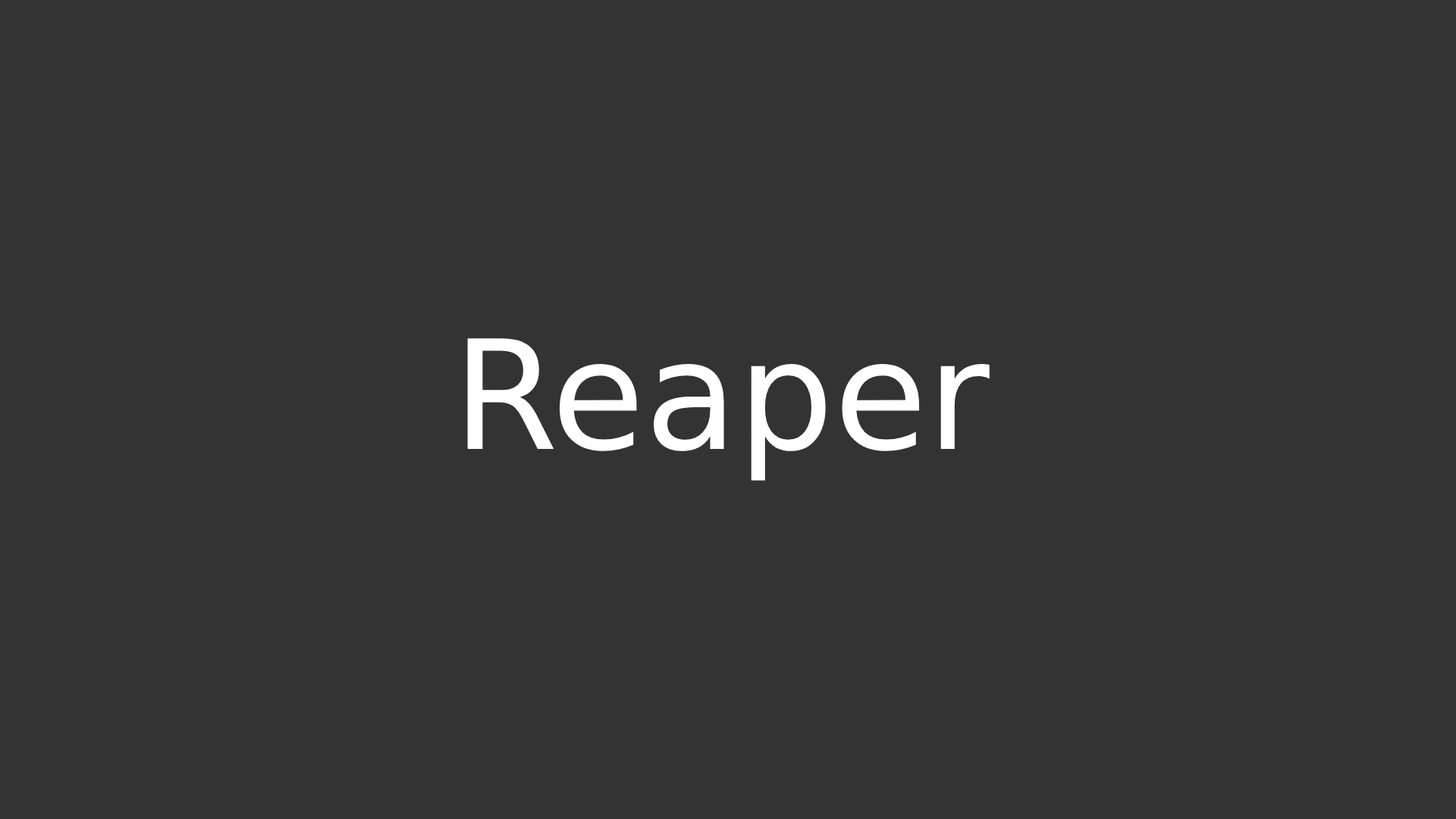
<style>
.page{position:relative;width:1456px;height:819px;background:#333333}
.page>*{position:absolute;margin:0}
.t1{font:151.7px "DejaVuSans";color:#ffffff}
</style>
<div class="page">
<p class="t1" style="left:467px;top:338px;width:523px;height:143px">Reaper</p>
</div>
